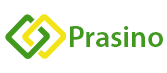
<style>
.page{position:relative;width:167px;height:73px;background:#ffffff}
.page>*{position:absolute;margin:0}
.t1{font:30px "MyriadPro-Semibold";color:#419a1c}
</style>
<div class="page">
<p class="t1" style="left:70px;top:26px;width:93px;height:21px">Prasino</p>
</div>
